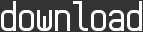
<style>
.page{position:relative;width:143px;height:32px;background:#333333}
.page>*{position:absolute;margin:0}
.t1{font:48px "Monkey";color:#ffffff}
</style>
<div class="page">
<p class="t1" style="left:1px;top:1px;width:141px;height:30px">download</p>
</div>
